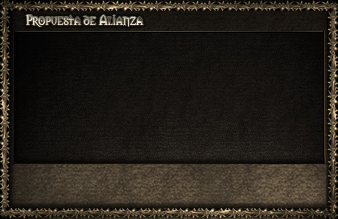
<style>
.page{position:relative;width:338px;height:219px}
.page>*{position:absolute;margin:0}
.t1{font:13px "Morpheus"}
</style>
<div class="page">
<p class="t1" style="left:26px;top:15px;width:118px;height:12px">Propuesta de Alianza</p>
</div>
